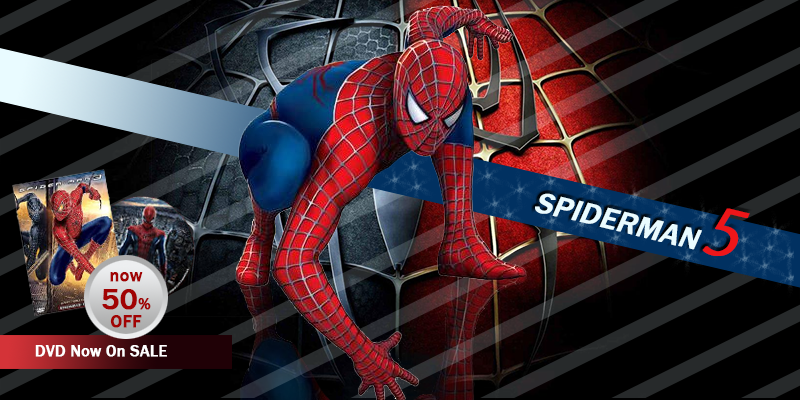
<style>
.page{position:relative;width:800px;height:400px;background:#000000}
.page>*{position:absolute;margin:0}
.t1{font:30px "FranklinGothic-Medium";color:#e9fbff;font-weight:bold;font-style:italic}
.t2{font:64px "KozGoPr6N-Regular";color:#ee1619;font-weight:bold;font-style:italic}
.t3{font:18px/18px "FranklinGothic-Medium";color:#a10303;font-weight:bold}
.t4{font:30px/28px "FranklinGothic-Medium";color:#a10303;font-weight:bold}
.t5{font:16px/28px "FranklinGothic-Medium";color:#a10303;font-weight:bold}
.t6{font:18px/28px "FranklinGothic-Medium";color:#a10303;font-weight:bold}
.t7{font:16px "FranklinGothic-Medium";color:#ffffff;font-weight:bold}
</style>
<div class="page">
<p class="t1" style="left:535px;top:193px;width:215px;height:63px;rotate:14deg">SPIDERMAN <span class="t2">5</span></p>
<p class="t3" style="left:102px;top:272px;width:49px;height:56px;text-align:center">now<br><span class="t4">50</span><span class="t5">%<br></span><span class="t6">OFF</span></p>
<p class="t7" style="left:35px;top:345px;width:132px;height:12px">DVD Now On SALE</p>
</div>
